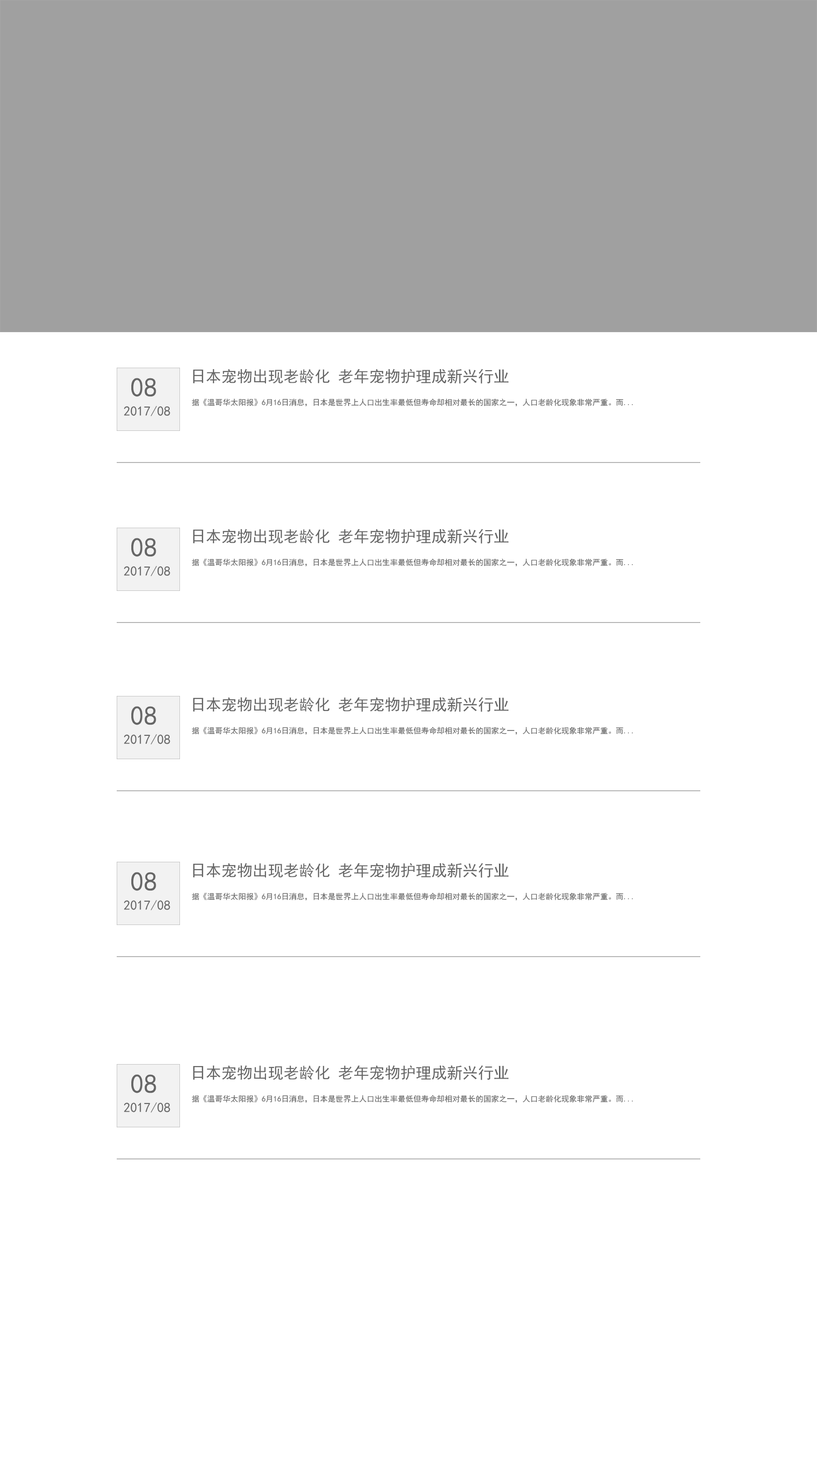
<style>
.page{position:relative;width:817px;height:1459px;background:#ffffff}
.page>*{position:absolute;margin:0}
.t1{font:26.9px "SimHei";color:#666666}
.t2{font:15.6px "SimHei";color:#666666}
.t3{font:7.8px "SimHei";color:#666666}
.t4{font:13.4px "SimHei";color:#666666}
</style>
<div class="page">
<p class="t1" style="left:131px;top:378px;width:25px;height:19px">08</p>
<p class="t2" style="left:193px;top:369px;width:316px;height:15px">日本宠物出现老龄化 老年宠物护理成新兴行业</p>
<p class="t3" style="left:192px;top:398px;width:441px;height:9px">据《温哥华太阳报》6月16日消息，日本是世界上人口出生率最低但寿命却相对最长的国家之一，人口老龄化现象非常严重。而...</p>
<p class="t4" style="left:124px;top:406px;width:46px;height:10px">2017/08</p>
<p class="t2" style="left:193px;top:529px;width:316px;height:15px">日本宠物出现老龄化 老年宠物护理成新兴行业</p>
<p class="t1" style="left:131px;top:538px;width:25px;height:19px">08</p>
<p class="t4" style="left:124px;top:566px;width:46px;height:10px">2017/08</p>
<p class="t3" style="left:192px;top:558px;width:441px;height:9px">据《温哥华太阳报》6月16日消息，日本是世界上人口出生率最低但寿命却相对最长的国家之一，人口老龄化现象非常严重。而...</p>
<p class="t2" style="left:193px;top:697px;width:316px;height:15px">日本宠物出现老龄化 老年宠物护理成新兴行业</p>
<p class="t1" style="left:131px;top:706px;width:25px;height:19px">08</p>
<p class="t4" style="left:124px;top:734px;width:46px;height:11px">2017/08</p>
<p class="t3" style="left:192px;top:727px;width:441px;height:8px">据《温哥华太阳报》6月16日消息，日本是世界上人口出生率最低但寿命却相对最长的国家之一，人口老龄化现象非常严重。而...</p>
<p class="t2" style="left:193px;top:863px;width:316px;height:15px">日本宠物出现老龄化 老年宠物护理成新兴行业</p>
<p class="t1" style="left:131px;top:872px;width:25px;height:19px">08</p>
<p class="t3" style="left:192px;top:893px;width:441px;height:8px">据《温哥华太阳报》6月16日消息，日本是世界上人口出生率最低但寿命却相对最长的国家之一，人口老龄化现象非常严重。而...</p>
<p class="t4" style="left:124px;top:900px;width:46px;height:11px">2017/08</p>
<p class="t2" style="left:193px;top:1065px;width:316px;height:15px">日本宠物出现老龄化 老年宠物护理成新兴行业</p>
<p class="t1" style="left:131px;top:1074px;width:25px;height:19px">08</p>
<p class="t3" style="left:192px;top:1095px;width:441px;height:8px">据《温哥华太阳报》6月16日消息，日本是世界上人口出生率最低但寿命却相对最长的国家之一，人口老龄化现象非常严重。而...</p>
<p class="t4" style="left:124px;top:1102px;width:46px;height:11px">2017/08</p>
</div>
